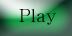
<style>
.page{position:relative;width:72px;height:36px}
.page>*{position:absolute;margin:0}
.t1{font:18px "Batang";color:#030303}
</style>
<div class="page">
<p class="t1" style="left:19px;top:9px;width:37px;height:16px">Play</p>
</div>
